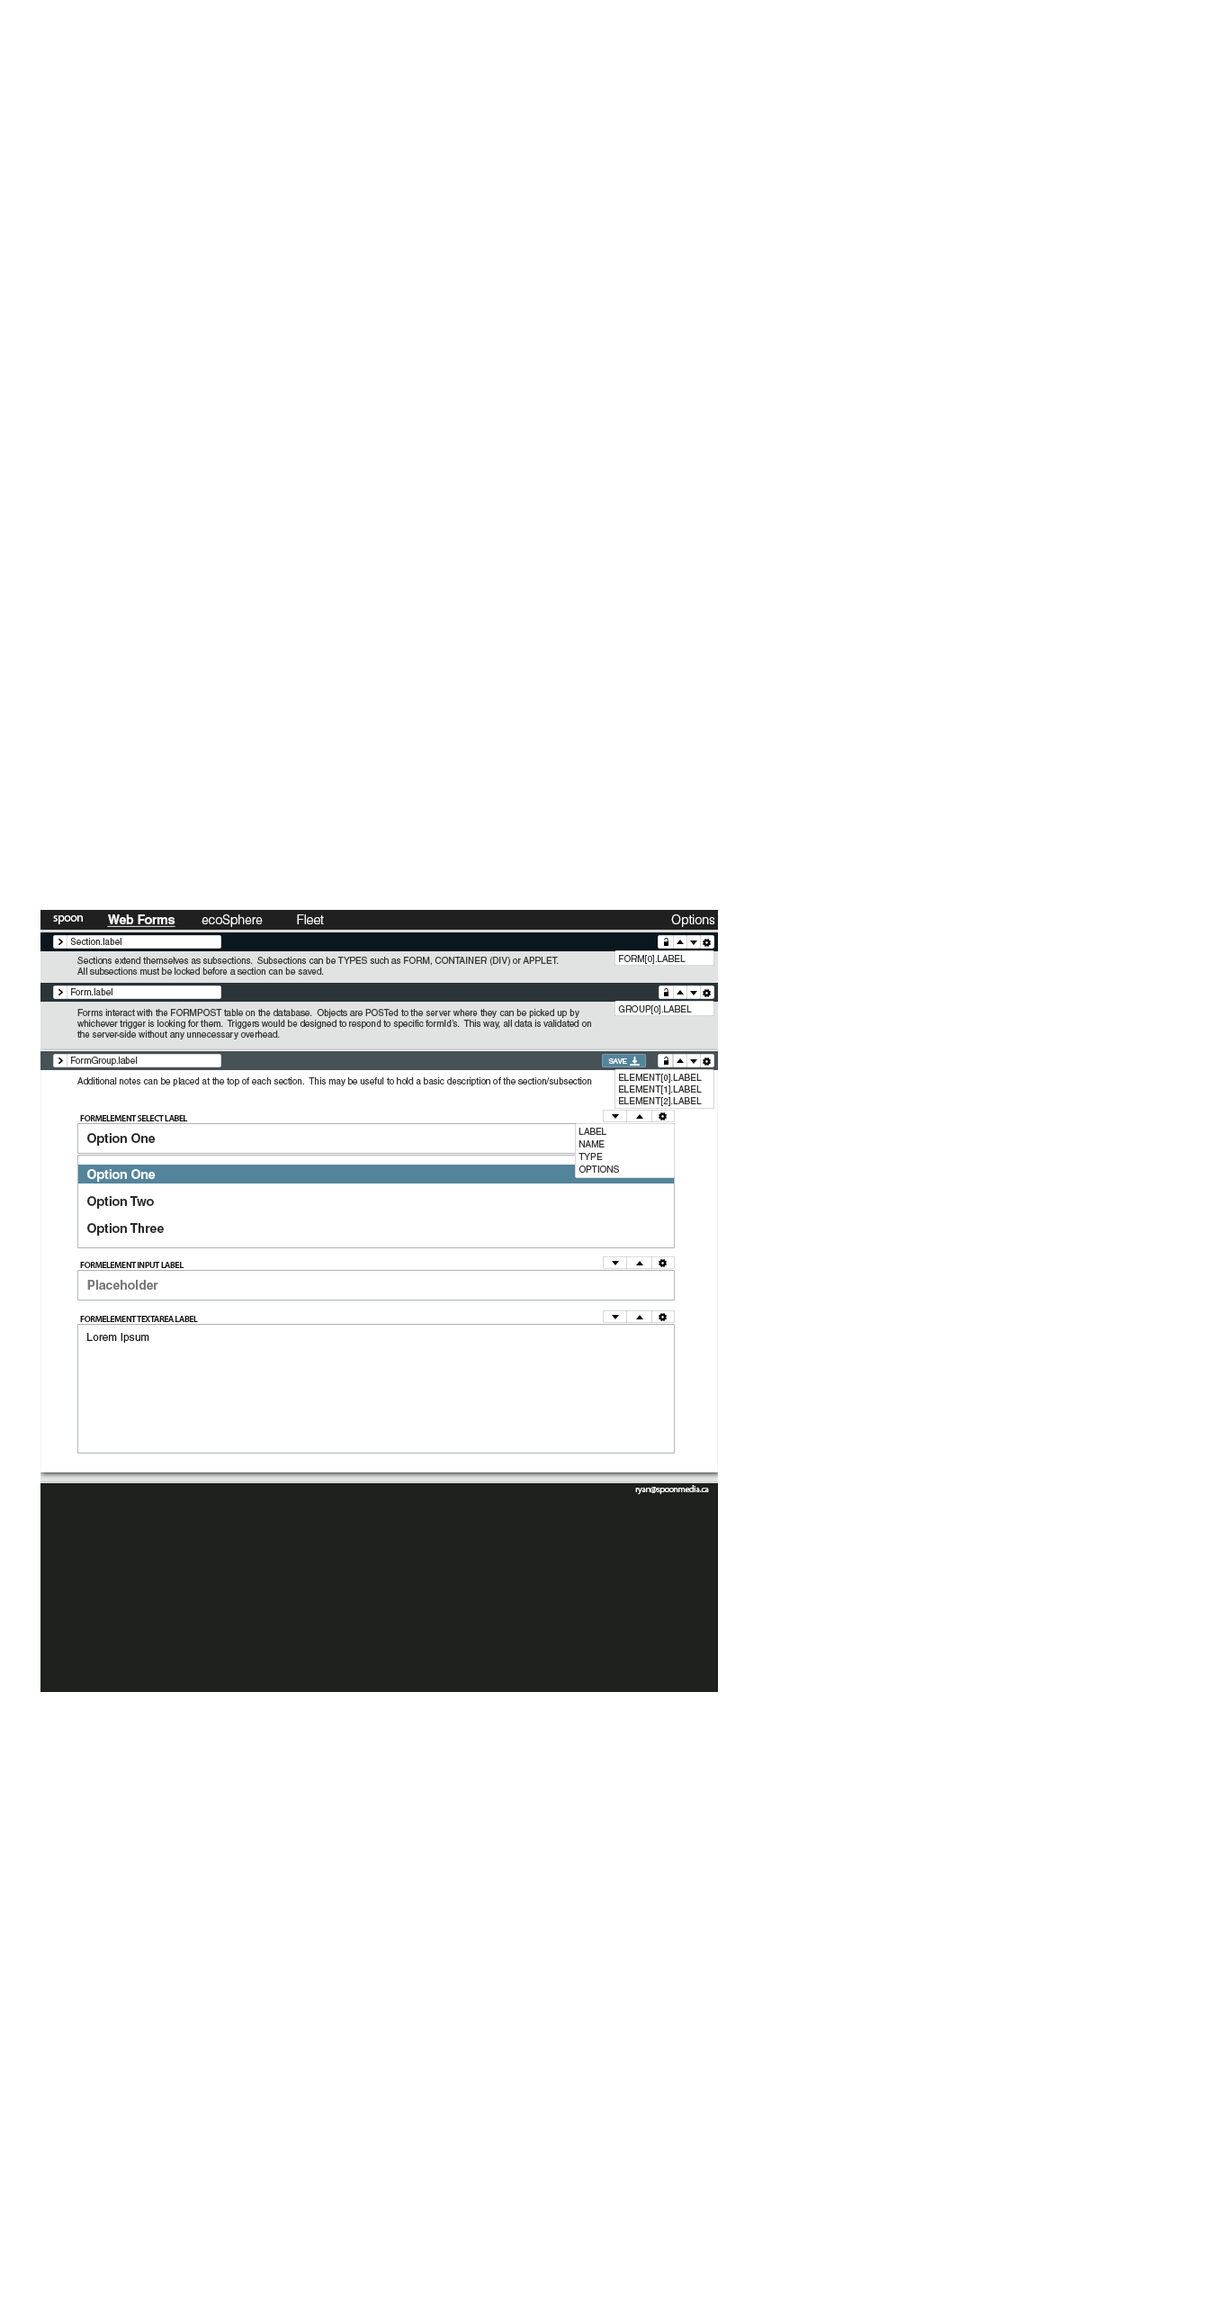
<style>
.page{position:relative;width:1229px;height:2304px;background:#ffffff}
.page>*{position:absolute;margin:0}
.t1{font:12.6px "MyriadPro-Regular";letter-spacing:-0.045em;color:#ffffff}
.t2{font:12.6px "HelveticaLTStd-Bold";color:#ffffff;text-decoration:underline}
.t3{font:12.6px "HelveticaLTStd-Light";color:#ffffff}
.t4{font:9px "HelveticaLTStd-Roman";color:#353734}
.t5{font:7.2px "HelveticaLTStd-Roman";color:#ffffff}
.t6{font:9px "MyriadPro-Semibold";letter-spacing:-0.045em;color:#131313}
.t7{font:12.6px "HelveticaLTStd-Bold";color:#292929}
.t8{font:12.6px "HelveticaLTStd-Bold";color:#ffffff}
.t9{font:12.6px "HelveticaLTStd-Bold";color:#797979}
.t10{font:10.8px "HelveticaLTStd-Roman";color:#1c1c1c}
.t11{font:9px "MyriadPro-Regular";letter-spacing:-0.045em;color:#ffffff}
</style>
<div class="page">
<p class="t1" style="left:53px;top:915px;width:30px;height:9px">spoon</p>
<p class="t2" style="left:107px;top:914px;width:69px;height:13px">Web Forms</p>
<p class="t3" style="left:202px;top:914px;width:61px;height:13px">ecoSphere</p>
<p class="t3" style="left:297px;top:914px;width:27px;height:10px">Fleet</p>
<p class="t3" style="left:671px;top:914px;width:45px;height:13px">Options</p>
<p class="t4" style="left:70px;top:938px;width:52px;height:7px">Section.label</p>
<p class="t4" style="left:77px;top:957px;width:482px;height:18px">Sections extend themselves as subsections.  Subsections can be TYPES such as FORM, CONTAINER (DIV) or APPLET.<br>All subsections must be locked before a section can be saved.</p>
<p class="t4" style="left:619px;top:955px;width:67px;height:9px">FORM[0].LABEL</p>
<p class="t4" style="left:71px;top:988px;width:41px;height:7px">Form.label</p>
<p class="t4" style="left:77px;top:1009px;width:514px;height:31px;text-align:justify">Forms interact with the FORMPOST table on the database.  Objects are POSTed to the server where they can be picked up by <br>whichever trigger is looking for them.  Triggers would be designed to respond to specific formId’s.  This way, all data is validated on <br>the server-side without any unnecessary overhead.</p>
<p class="t4" style="left:618px;top:1005px;width:74px;height:9px">GROUP[0].LABEL</p>
<p class="t4" style="left:71px;top:1057px;width:67px;height:9px">FormGroup.label</p>
<p class="t5" style="left:608px;top:1058px;width:19px;height:6px">SAVE</p>
<p class="t4" style="left:619px;top:1074px;width:83px;height:9px">ELEMENT[0].LABEL</p>
<p class="t4" style="left:77px;top:1077px;width:515px;height:9px">Additional notes can be placed at the top of each section.  This may be useful to hold a basic description of the section/subsection</p>
<p class="t4" style="left:619px;top:1085px;width:83px;height:9px">ELEMENT[1].LABEL</p>
<p class="t4" style="left:619px;top:1097px;width:83px;height:9px">ELEMENT[2].LABEL</p>
<p class="t6" style="left:80px;top:1115px;width:108px;height:6px">FORMELEMENT SELECT LABEL</p>
<p class="t7" style="left:87px;top:1133px;width:69px;height:13px">Option One</p>
<p class="t4" style="left:579px;top:1128px;width:28px;height:7px">LABEL</p>
<p class="t4" style="left:579px;top:1140px;width:26px;height:8px">NAME</p>
<p class="t4" style="left:579px;top:1153px;width:24px;height:7px">TYPE</p>
<p class="t8" style="left:87px;top:1169px;width:69px;height:13px">Option One</p>
<p class="t4" style="left:579px;top:1166px;width:40px;height:7px">OPTIONS</p>
<p class="t7" style="left:87px;top:1196px;width:67px;height:13px">Option Two</p>
<p class="t7" style="left:87px;top:1223px;width:77px;height:13px">Option Three</p>
<p class="t6" style="left:80px;top:1262px;width:104px;height:6px">FORMELEMENT INPUT LABEL</p>
<p class="t9" style="left:87px;top:1280px;width:71px;height:10px">Placeholder</p>
<p class="t6" style="left:80px;top:1316px;width:118px;height:6px">FORMELEMENT TEXTAREA LABEL</p>
<p class="t10" style="left:87px;top:1333px;width:62px;height:10px">Lorem Ipsum</p>
<p class="t11" style="left:635px;top:1485px;width:74px;height:10px">ryan@spoonmedia.ca</p>
</div>
